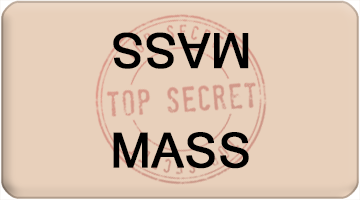
<style>
.page{position:relative;width:360px;height:200px;background:#e8d0bb}
.page>*{position:absolute;margin:0}
.t1{font:48px "ArialMT";color:#000000;font-weight:bold}
</style>
<div class="page">
<p class="t1" style="left:113px;top:32px;width:136px;height:37px;rotate:180deg">MASS</p>
<p class="t1" style="left:113px;top:132px;width:136px;height:37px">MASS</p>
</div>
